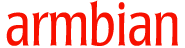
<style>
.page{position:relative;width:185px;height:48px;background:#ffffff}
.page>*{position:absolute;margin:0}
.t1{font:60px "Poppl-Laudatio-CondensedLight";color:#f71000}
</style>
<div class="page">
<p class="t1" style="left:6px;top:0px;width:172px;height:46px">armbian</p>
</div>
